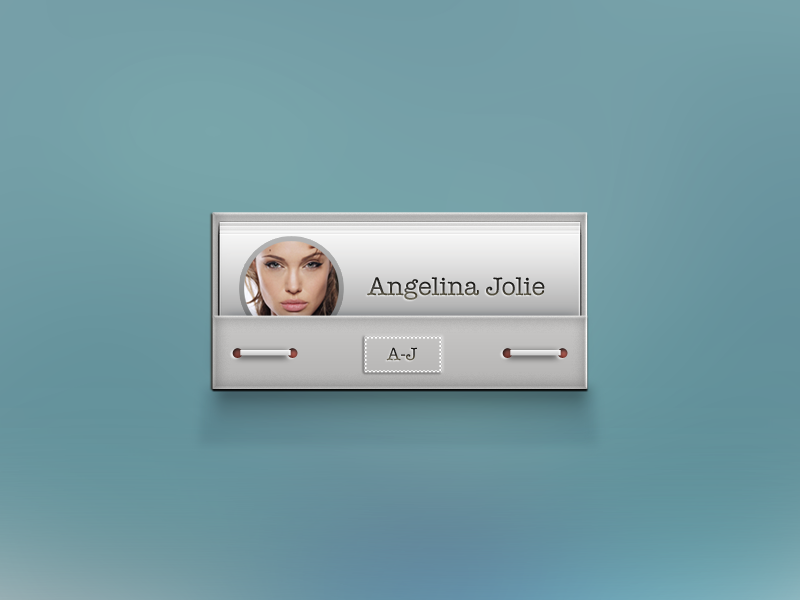
<style>
.page{position:relative;width:800px;height:600px}
.page>*{position:absolute;margin:0}
.t1{font:26px "AmericanTypewriter"}
.t2{font:18px "AmericanTypewriter"}
</style>
<div class="page">
<p class="t1" style="left:367px;top:277px;width:178px;height:23px">Angelina Jolie</p>
<p class="t2" style="left:386px;top:347px;width:31px;height:14px">A-J</p>
</div>
